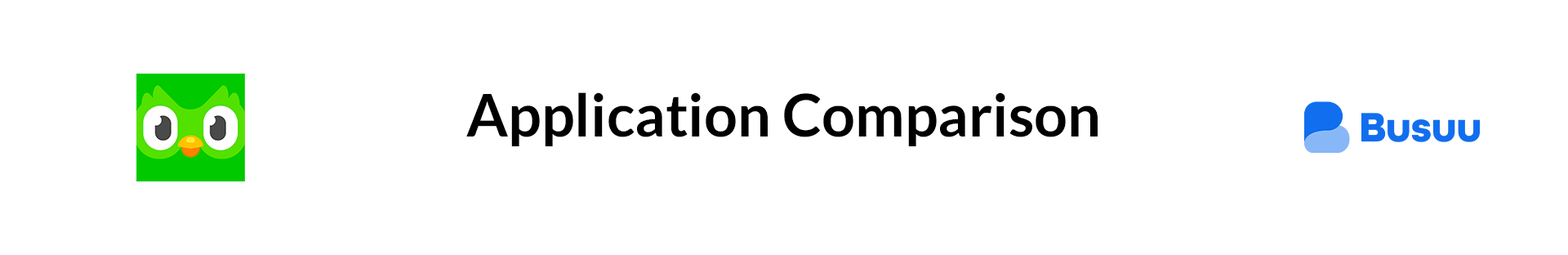
<style>
.page{position:relative;width:1568px;height:255px;background:#ffffff}
.page>*{position:absolute;margin:0}
.t1{font:58.8px "Lato-Bold";color:#000000}
</style>
<div class="page">
<p class="t1" style="left:466px;top:92px;width:632px;height:54px">Application Comparison</p>
</div>
